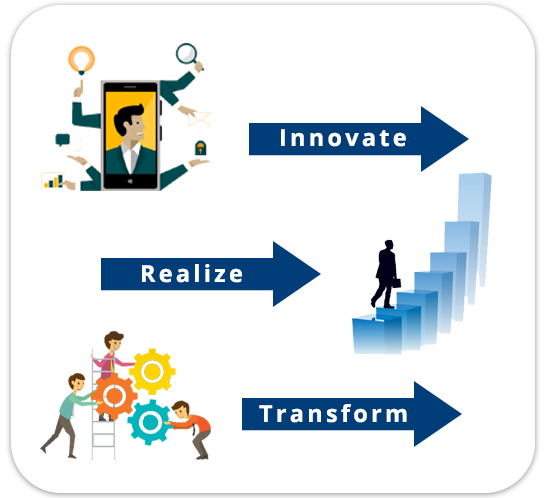
<style>
.page{position:relative;width:546px;height:498px;background:#ffffff}
.page>*{position:absolute;margin:0}
.t1{font:23.5px "OpenSans-Bold";letter-spacing:0.14em;color:#ffffff}
</style>
<div class="page">
<p class="t1" style="left:281px;top:129px;width:125px;height:18px">Innovate</p>
<p class="t1" style="left:142px;top:264px;width:100px;height:19px">Realize</p>
<p class="t1" style="left:259px;top:404px;width:148px;height:19px">Transform</p>
</div>
